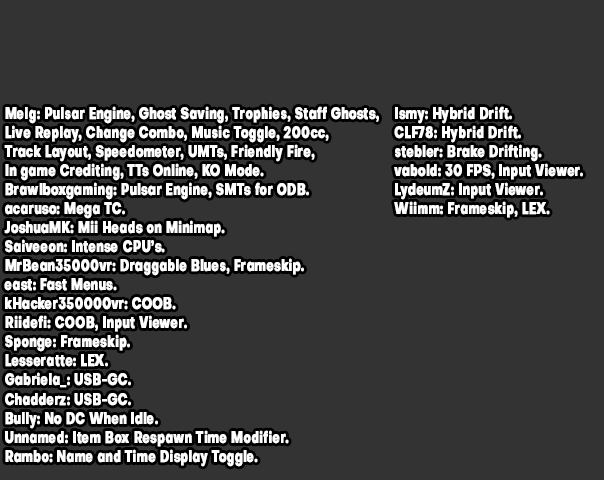
<style>
.page{position:relative;width:604px;height:480px;background:#333333}
.page>*{position:absolute;margin:0}
.t1{font:15.9px "Objectivity-ExtraBold";color:#ffffff;font-weight:bold;scale:0.73 1}
</style>
<div class="page">
<p class="t1" style="left:4px;top:106px;width:375px;height:361px">Melg: Pulsar Engine, Ghost Saving, Trophies, Staff Ghosts,<br>Live Replay, Change Combo, Music Toggle, 200cc, <br>Track Layout, Speedometer, UMTs, Friendly Fire, <br>In game Crediting, TTs Online, KO Mode.<br>Brawlboxgaming: Pulsar Engine, SMTs for ODB.<br>acaruso: Mega TC.<br>JoshuaMK: Mii Heads on Minimap.<br>Saiveeon: Intense CPU’s.<br>MrBean35000vr: Draggable Blues, Frameskip.<br>east: Fast Menus.<br>kHacker350000vr: COOB.<br>Riidefi: COOB, Input Viewer.<br>Sponge: Frameskip.<br>Lesseratte: LEX.<br>Gabriela_: USB-GC.<br>Chadderz: USB-GC.<br>Bully: No DC When Idle.<br>Unnamed: Item Box Respawn Time Modifier.<br>Rambo: Name and Time Display Toggle.</p>
<p class="t1" style="left:394px;top:106px;width:189px;height:112px">Ismy: Hybrid Drift.<br>CLF78: Hybrid Drift.<br>stebler: Brake Drifting.<br>vabold: 30 FPS, Input Viewer.<br>LydeumZ: Input Viewer.<br>Wiimm: Frameskip, LEX.</p>
</div>
